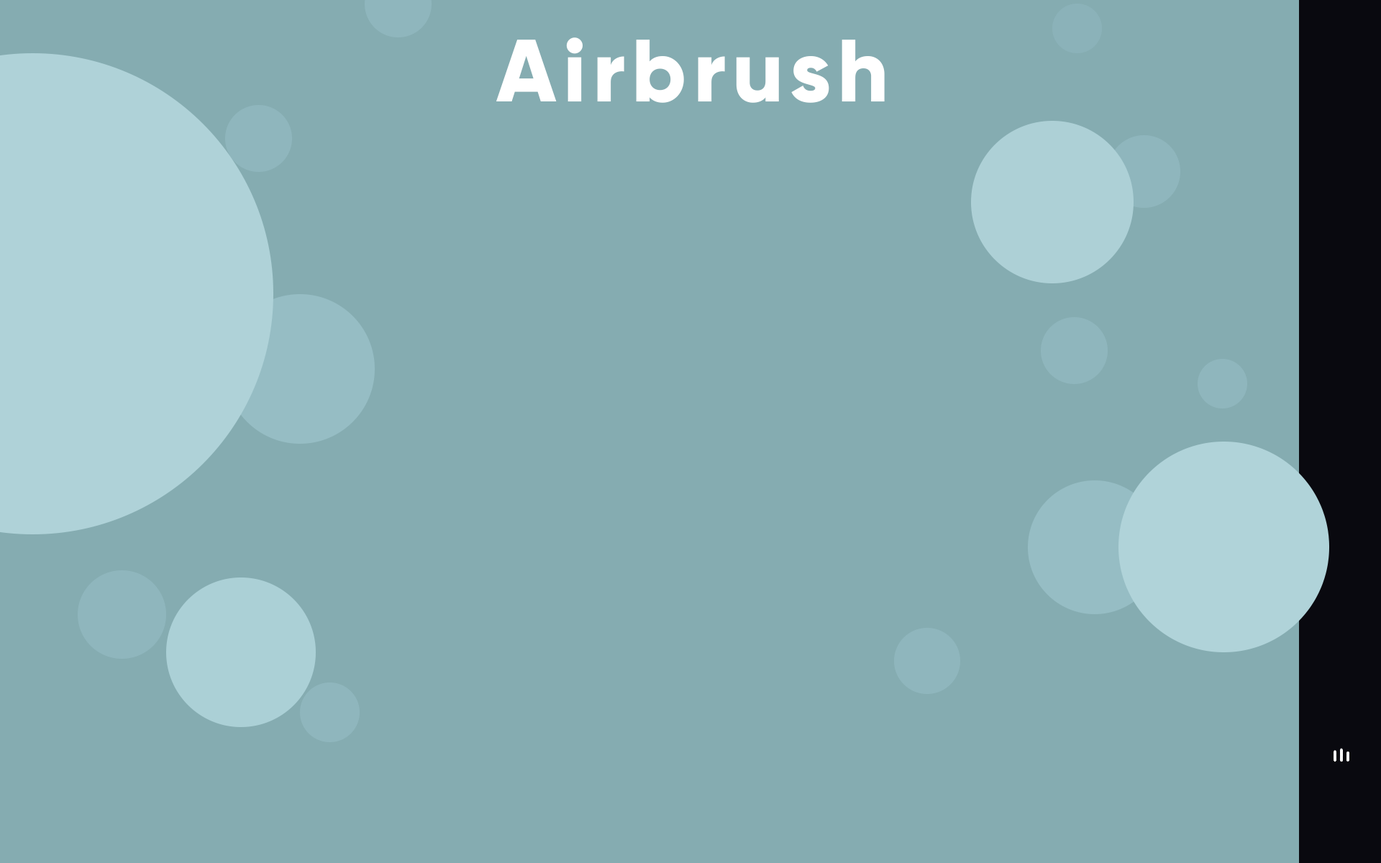
<style>
.page{position:relative;width:1381px;height:863px;background:#85acb1}
.page>*{position:absolute;margin:0}
.t1{font:88.2px "Gilroy-ExtraBold";letter-spacing:0.075em;color:#ffffff}
</style>
<div class="page">
<p class="t1" style="left:496px;top:37px;width:389px;height:66px">Airbrush</p>
</div>
